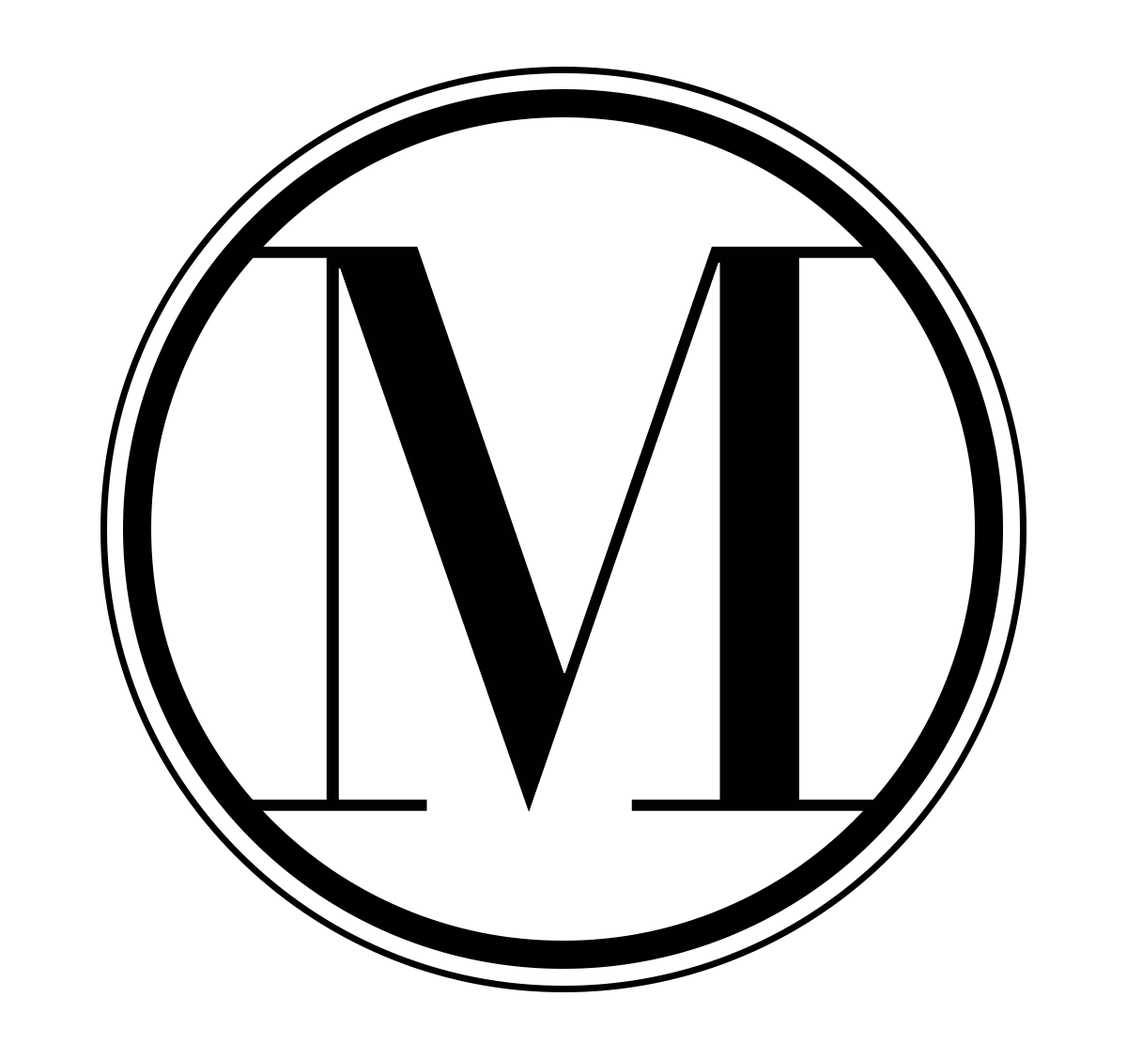
<style>
.page{position:relative;width:1127px;height:1058px;background:#ffffff}
.page>*{position:absolute;margin:0}
.t1{font:792.2px "Didot";color:#010101}
</style>
<div class="page">
<p class="t1" style="left:239px;top:246px;width:648px;height:566px">M</p>
</div>
